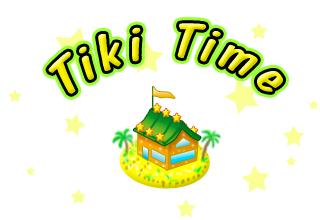
<style>
.page{position:relative;width:320px;height:220px;background:#ffffff}
.page>*{position:absolute;margin:0}
.t1{font:51.8px "DomCasualBT-Regular";letter-spacing:0.095em;font-style:italic}
</style>
<div class="page">
<p class="t1" style="left:48px;top:23px;width:235px;height:71px;rotate:-1deg">Tiki Time</p>
</div>
